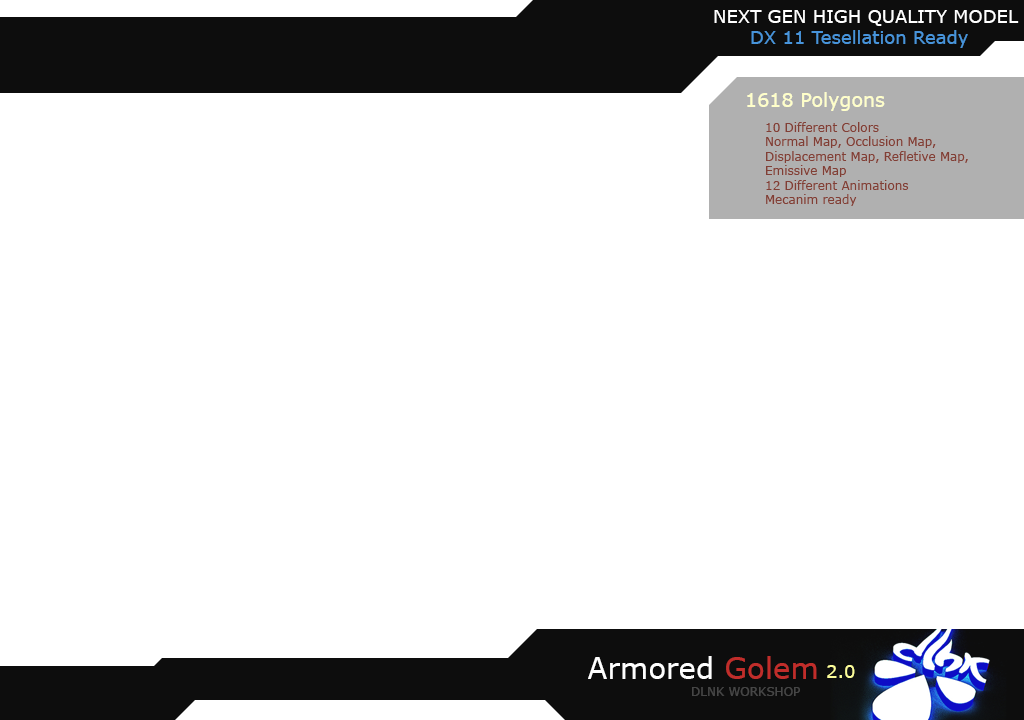
<style>
.page{position:relative;width:1024px;height:720px;background:#ffffff}
.page>*{position:absolute;margin:0}
.t1{font:18px "Verdana";color:#ffffff}
.t2{font:18px "Verdana";color:#4794db}
.t3{font:19.1px "Verdana";color:#ffffc9}
.t4{font:12px "Verdana";color:#803f36}
.t5{font:29.2px "Verdana";color:#ffffff}
.t6{font:29.2px "Verdana";color:#c12d2a}
.t7{font:18px "Verdana";color:#fcfd99}
.t8{font:12px "Verdana";color:#464646}
</style>
<div class="page">
<p class="t1" style="left:714px;top:10px;width:305px;height:16px">NEXT GEN HIGH QUALITY MODEL</p>
<p class="t2" style="left:751px;top:30px;width:217px;height:18px">DX 11 Tesellation Ready</p>
<p class="t3" style="left:747px;top:92px;width:138px;height:19px">1618 Polygons</p>
<p class="t4" style="left:766px;top:122px;width:202px;height:84px">10 Different Colors<br>Normal Map, Occlusion Map,<br>Displacement Map, Refletive Map,<br>Emissive Map<br>12 Different Animations<br>Mecanim ready</p>
<p class="t5" style="left:588px;top:656px;width:229px;height:23px">Armored <span class="t6">Golem</span></p>
<p class="t7" style="left:827px;top:665px;width:28px;height:13px">2.0</p>
<p class="t8" style="left:692px;top:687px;width:108px;height:9px">DLNK WORKSHOP</p>
</div>
